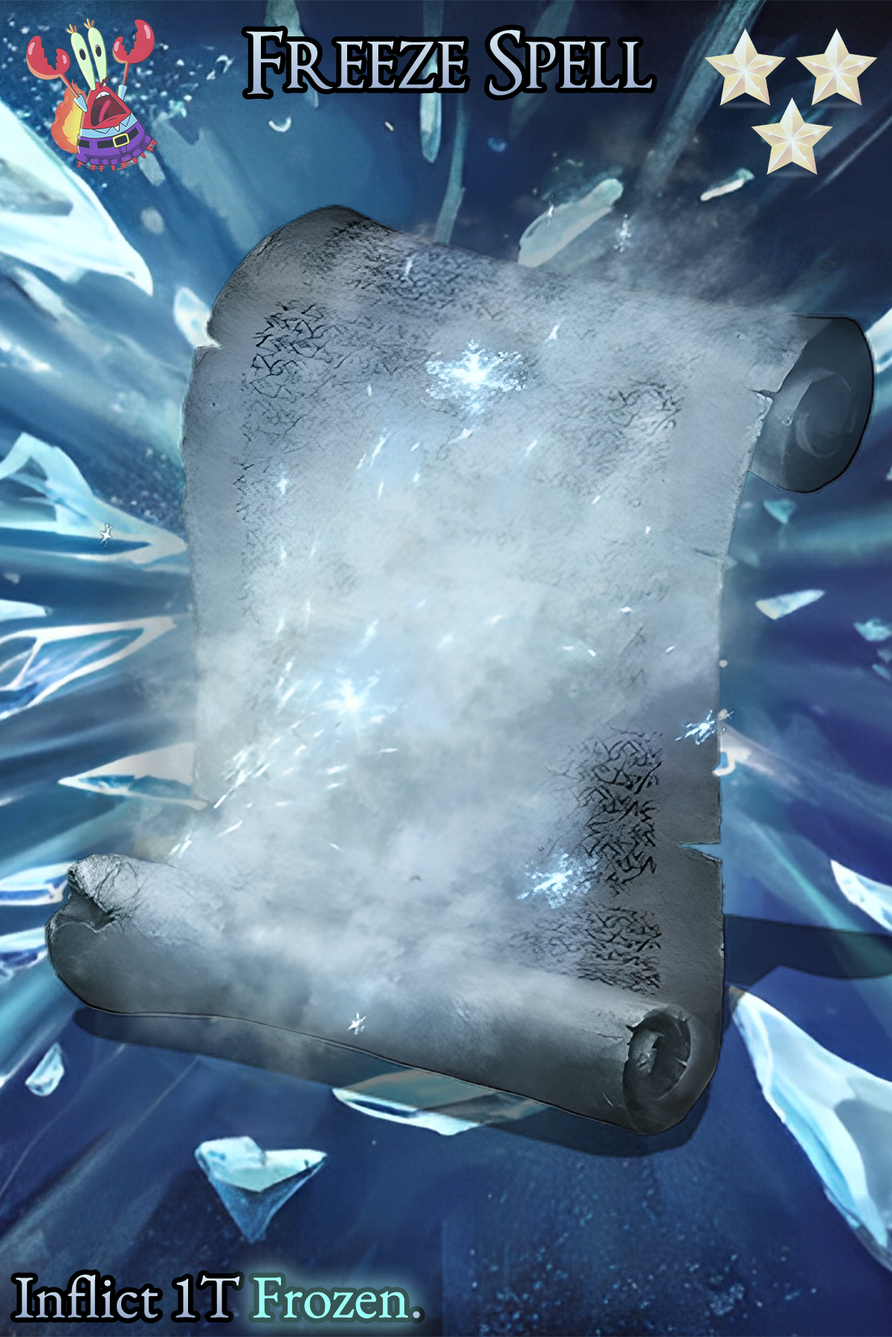
<style>
.page{position:relative;width:892px;height:1337px}
.page>*{position:absolute;margin:0}
.t1{font:144.1px "OptimusPrinceps"}
.t2{font:103.3px "EBGaramond-Regular"}
</style>
<div class="page">
<p class="t1" style="left:246px;top:30px;width:406px;height:66px">Freeze Spell</p>
<p class="t2" style="left:15px;top:1275px;width:405px;height:44px">Inflict 1T Frozen.</p>
</div>
